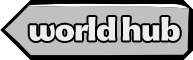
<style>
.page{position:relative;width:193px;height:60px;background:#c0c0c0}
.page>*{position:absolute;margin:0}
.t1{font:28px "MEgalopolisExtra";letter-spacing:-0.05em;color:#ededed}
</style>
<div class="page">
<p class="t1" style="left:29px;top:17px;width:151px;height:24px">world hub</p>
</div>
